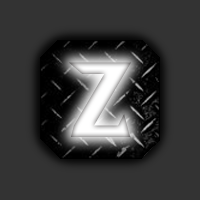
<style>
.page{position:relative;width:200px;height:200px;background:#333333}
.page>*{position:absolute;margin:0}
.t1{font:100px "aAbsoluteEmpire";letter-spacing:0.041em}
</style>
<div class="page">
<p class="t1" style="left:69px;top:62px;width:62px;height:75px">Z</p>
</div>
